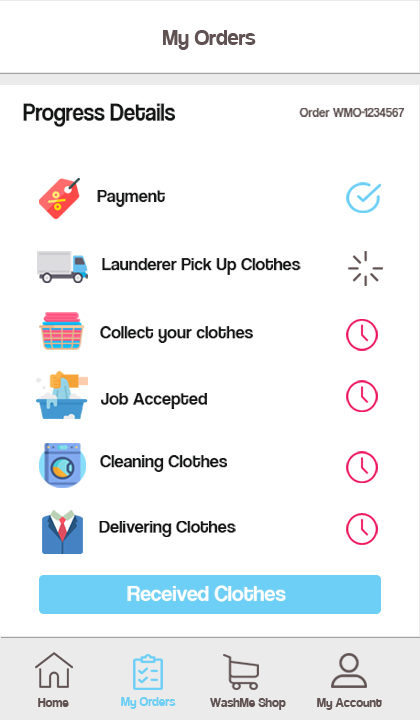
<style>
.page{position:relative;width:420px;height:720px;background:#ffffff}
.page>*{position:absolute;margin:0}
.t1{font:24px "Coolvetica-Regular";color:#605252}
.t2{font:25.3px "CoolveticaRg-Regular";color:#121313;scale:0.9 1}
.t3{font:13.5px "CoolveticaRg-Regular";color:#605252;scale:0.96 1}
.t4{font:18.7px "CoolveticaRg-Regular";color:#121313}
.t5{font:22.4px "CoolveticaRg-Regular";color:#feffff}
.t6{font:14px "Coolvetica-Regular";color:#605252}
.t7{font:14px "Coolvetica-Regular";color:#6dcff6}
</style>
<div class="page">
<p class="t1" style="left:163px;top:30px;width:93px;height:20px">My Orders</p>
<p class="t2" style="left:23px;top:103px;width:152px;height:24px">Progress Details</p>
<p class="t3" style="left:299px;top:108px;width:105px;height:9px">Order WMO-1234567</p>
<p class="t4" style="left:97px;top:190px;width:68px;height:17px">Payment</p>
<p class="t4" style="left:102px;top:258px;width:199px;height:17px">Launderer Pick Up Clothes</p>
<p class="t4" style="left:100px;top:326px;width:153px;height:17px">Collect your clothes</p>
<p class="t4" style="left:101px;top:393px;width:106px;height:16px">Job Accepted</p>
<p class="t4" style="left:100px;top:455px;width:127px;height:17px">Cleaning Clothes</p>
<p class="t4" style="left:99px;top:521px;width:137px;height:16px">Delivering Clothes</p>
<p class="t5" style="left:127px;top:585px;width:159px;height:17px">Received Clothes</p>
<p class="t6" style="left:38px;top:698px;width:31px;height:9px">Home</p>
<p class="t7" style="left:121px;top:697px;width:55px;height:12px">My Orders</p>
<p class="t6" style="left:210px;top:698px;width:76px;height:12px">WashMe Shop</p>
<p class="t6" style="left:317px;top:698px;width:65px;height:12px">My Account</p>
</div>
